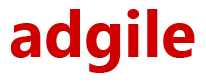
<style>
.page{position:relative;width:206px;height:83px;background:#ffffff}
.page>*{position:absolute;margin:0}
.t1{font:65px "MyanmarText-Bold";color:#ce0000}
</style>
<div class="page">
<p class="t1" style="left:10px;top:9px;width:185px;height:64px">adgile</p>
</div>
